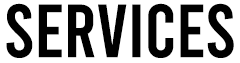
<style>
.page{position:relative;width:240px;height:63px;background:#ffffff}
.page>*{position:absolute;margin:0}
.t1{font:75px "Bebas-Regular";color:#000000}
</style>
<div class="page">
<p class="t1" style="left:6px;top:3px;width:228px;height:55px">services</p>
</div>
